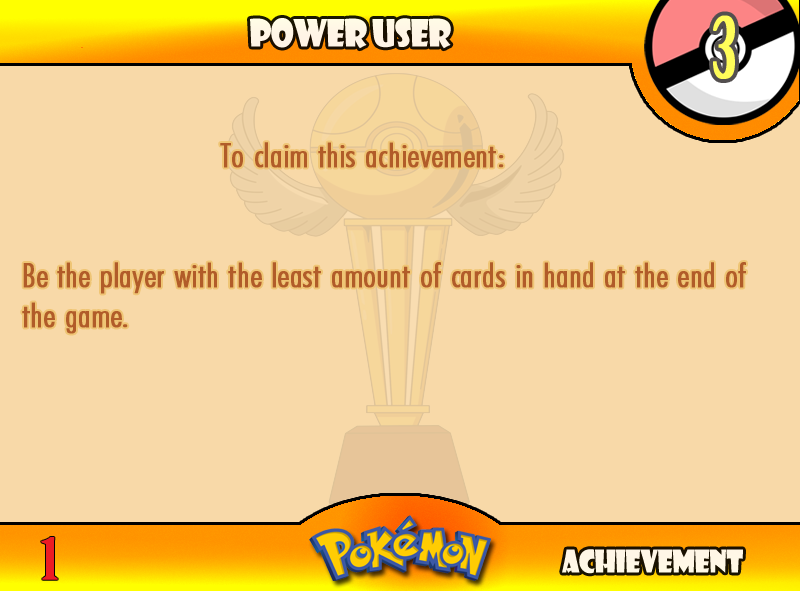
<style>
.page{position:relative;width:800px;height:591px;background:#f8d9a8}
.page>*{position:absolute;margin:0}
.t1{font:83.3px "BirchStd";letter-spacing:0.025em;color:#fffd59;font-weight:bold}
.t2{font:36.7px "ShowcardGothic-Reg";letter-spacing:-0.025em;color:#fff6e6;scale:0.91 1}
.t3{font:33.3px "FuturaCondensedBQ-Light";color:#b15c29;font-weight:bold;scale:1.08 1}
.t4{font:55.6px "BirchStd";color:#ed1c24;font-weight:bold;scale:1.5 1}
.t5{font:30.6px "ShowcardGothic-Reg";letter-spacing:-0.025em;color:#fff7e6;scale:0.91 1}
</style>
<div class="page">
<p class="t1" style="left:713px;top:15px;width:22px;height:64px">3</p>
<p class="t2" style="left:250px;top:18px;width:201px;height:31px">Power User</p>
<p class="t3" style="left:22px;top:142px;width:724px;height:192px">To claim this achievement:<br><br><br>Be the player with the least amount of cards in hand at the end of the game.</p>
<p class="t4" style="left:41px;top:537px;width:17px;height:43px">1</p>
<p class="t5" style="left:562px;top:549px;width:181px;height:25px">Achievement</p>
</div>
